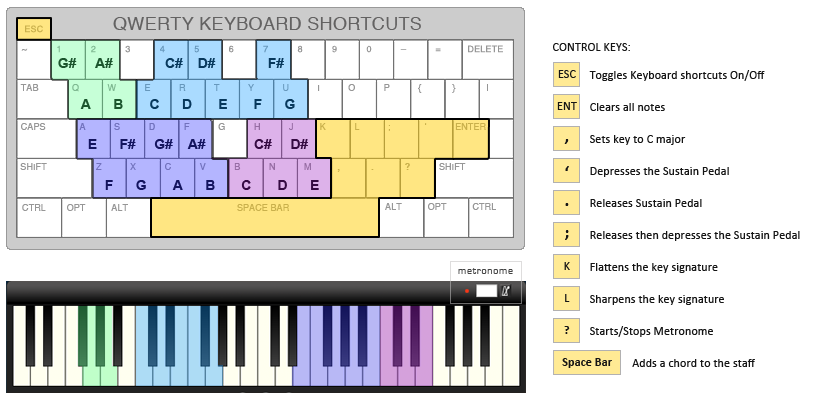
<style>
.page{position:relative;width:814px;height:404px;background:#ffffff}
.page>*{position:absolute;margin:0}
.t1{font:18px "Helvetica";letter-spacing:0.018em;color:#636262}
.t2{font:12px "Calibri";letter-spacing:0.01em;color:#151515}
.t3{font:14px "Arial-BoldMT";letter-spacing:-0.01em}
.t4{font:12px/32px "Calibri";letter-spacing:0.01em;color:#151515}
.t5{font:18px/32px "Calibri-Bold";letter-spacing:0.01em;color:#151515}
.t6{font:18px/36px "Calibri-Bold";letter-spacing:0.01em;color:#151515}
.t7{font:18px/28px "Calibri-Bold";letter-spacing:0.01em;color:#151515}
.t8{font:12px/32px "Calibri-Bold";letter-spacing:0.01em;color:#151515}
.t9{font:9px "Helvetica";letter-spacing:0.009em}
.t10{font:9px "Helvetica";letter-spacing:0.01em}
.t11{font:9px "Helvetica";letter-spacing:0.01em;color:#969696}
.t12{font:10px "EurostileRegular";letter-spacing:0.075em;color:#454545}
.t13{font:12px "Calibri-Bold";letter-spacing:0.01em;color:#151515}
</style>
<div class="page">
<p class="t1" style="left:113px;top:17px;width:308px;height:14px">QWERTY KEYBOARD SHORTCUTS</p>
<p class="t2" style="left:553px;top:43px;width:77px;height:8px">CONTROL KEYS:</p>
<p class="t3" style="left:58px;top:58px;width:226px;height:10px">G#     A#              C#    D#              F#</p>
<p class="t4" style="left:557px;top:70px;width:20px;height:264px;text-align:center">ESC<br>ENT<br><span class="t5">,<br></span><span class="t6">‘<br></span><span class="t7">.<br></span><span class="t5">;<br></span>K<br>L<br><span class="t8">?</span></p>
<p class="t4" style="left:589px;top:70px;width:211px;height:297px">Toggles Keyboard shortcuts On/Off<br>Clears all notes<br>Sets key to C major<br>Depresses the Sustain Pedal<br>Releases Sustain Pedal<br>Releases then depresses the Sustain Pedal<br>Flattens the key signature<br>Sharpens the key signature<br>Starts/Stops Metronome<br>               Adds a chord to the staff</p>
<p class="t9" style="left:20px;top:84px;width:468px;height:9px">TAB             Q           W           E           R           T           Y           U           I           O           P           {            }            |</p>
<p class="t3" style="left:80px;top:99px;width:215px;height:10px">A      B       C      D       E       F      G</p>
<p class="t3" style="left:88px;top:139px;width:220px;height:10px">E      F#     G#    A#             C#     D#</p>
<p class="t3" style="left:105px;top:180px;width:214px;height:10px">F      G       A      B       C       D      E</p>
<p class="t10" style="left:22px;top:204px;width:267px;height:7px">CTRL        OPT          ALT                                          SPACE BAR</p>
<p class="t11" style="left:385px;top:203px;width:111px;height:7px">ALT          OPT          CTRL</p>
<p class="t12" style="left:458px;top:268px;width:55px;height:6px">metronome</p>
<p class="t13" style="left:562px;top:358px;width:50px;height:10px">Space Bar</p>
</div>
